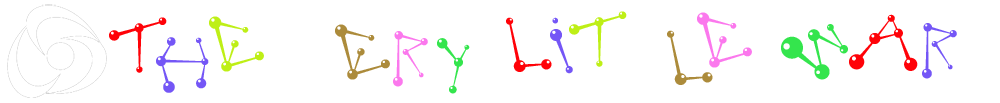
<style>
.page{position:relative;width:1000px;height:103px;background:#ffffff}
.page>*{position:absolute;margin:0}
.t1{font:75px "BPmolecules";color:#ff0208}
.t2{font:75px "BPmolecules";color:#beef16}
.t3{font:75px "BPmolecules";color:#7456f6}
.t4{font:75px "BPmolecules";color:#fb78ed}
.t5{font:75px "BPmolecules";color:#ac8b3b}
.t6{font:75px "BPmolecules";color:#34e54d}
</style>
<div class="page">
<p class="t1" style="left:109px;top:17px;width:58px;height:56px">T</p>
<p class="t2" style="left:209px;top:16px;width:55px;height:56px">E</p>
<p class="t1" style="left:506px;top:17px;width:46px;height:55px">L</p>
<p class="t3" style="left:550px;top:17px;width:23px;height:57px">I</p>
<p class="t2" style="left:569px;top:11px;width:58px;height:56px">T</p>
<p class="t4" style="left:697px;top:12px;width:55px;height:56px">E</p>
<p class="t1" style="left:849px;top:14px;width:69px;height:57px">A</p>
<p class="t5" style="left:335px;top:24px;width:55px;height:56px">E</p>
<p class="t5" style="left:667px;top:30px;width:46px;height:55px">L</p>
<p class="t6" style="left:781px;top:24px;width:67px;height:56px">W</p>
<p class="t3" style="left:922px;top:23px;width:35px;height:56px">R</p>
<p class="t3" style="left:156px;top:37px;width:53px;height:56px">H</p>
<p class="t4" style="left:393px;top:31px;width:35px;height:56px">R</p>
<p class="t6" style="left:437px;top:38px;width:33px;height:56px">Y</p>
</div>
